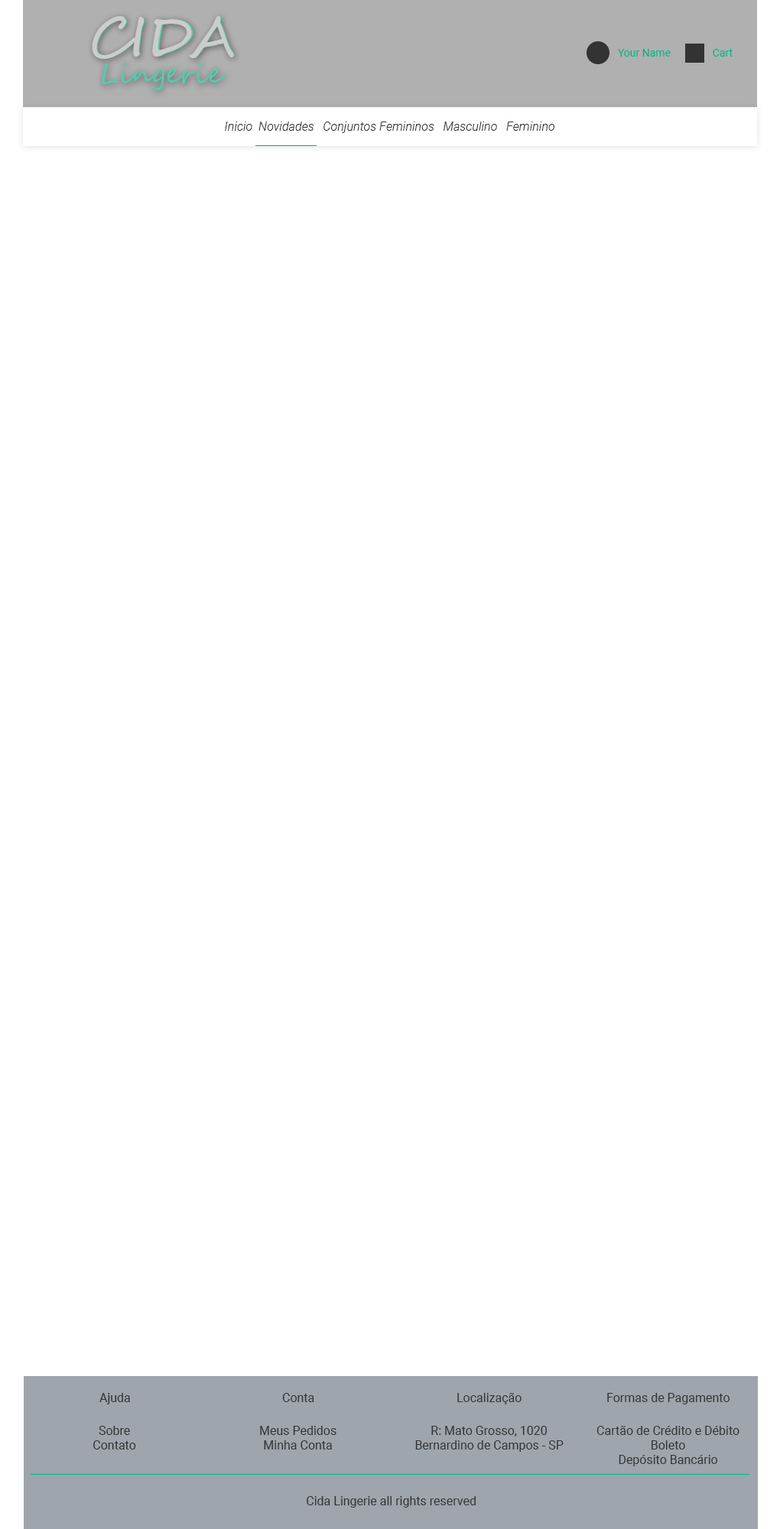
<style>
.page{position:relative;width:780px;height:1529px;background:#ffffff}
.page>*{position:absolute;margin:0}
.t1{font:55px "SegoeScript";color:#cccccc}
.t2{font:10.7px "Roboto-Regular";color:#00b388}
.t3{font:12.2px "Roboto-LightItalic";color:#333333}
.t4{font:12.2px "Roboto-Regular";color:#333333}
</style>
<div class="page">
<p class="t1" style="left:92px;top:16px;width:142px;height:43px">CIDA</p>
<p class="t2" style="left:618px;top:49px;width:53px;height:8px">Your Name</p>
<p class="t2" style="left:713px;top:49px;width:19px;height:8px">Cart</p>
<p class="t3" style="left:225px;top:122px;width:330px;height:11px">Inicio  Novidades   Conjuntos Femininos   Masculino   Feminino</p>
<p class="t4" style="left:99px;top:1393px;width:31px;height:11px">Ajuda</p>
<p class="t4" style="left:282px;top:1393px;width:32px;height:9px">Conta</p>
<p class="t4" style="left:457px;top:1393px;width:64px;height:11px">Localização</p>
<p class="t4" style="left:607px;top:1393px;width:122px;height:11px">Formas de Pagamento</p>
<p class="t4" style="left:93px;top:1426px;width:43px;height:24px;text-align:center">Sobre<br>Contato</p>
<p class="t4" style="left:260px;top:1426px;width:76px;height:24px;text-align:center">Meus Pedidos<br>Minha Conta</p>
<p class="t4" style="left:415px;top:1426px;width:148px;height:26px;text-align:center">R: Mato Grosso, 1020<br>Bernardino de Campos - SP</p>
<p class="t4" style="left:596px;top:1426px;width:143px;height:40px;text-align:center">Cartão de Crédito e Débito<br>Boleto<br>Depósito Bancário</p>
<p class="t4" style="left:307px;top:1496px;width:169px;height:12px">Cida Lingerie all rights reserved</p>
</div>
